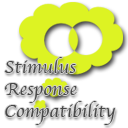
<style>
.page{position:relative;width:128px;height:128px;background:#ffffff}
.page>*{position:absolute;margin:0}
.t1{font:18.7px "Apple-Chancery";color:#484848;scale:1.04 1}
</style>
<div class="page">
<p class="t1" style="left:4px;top:57px;width:111px;height:68px">Stimulus<br>Response<br>Compatibility</p>
</div>
